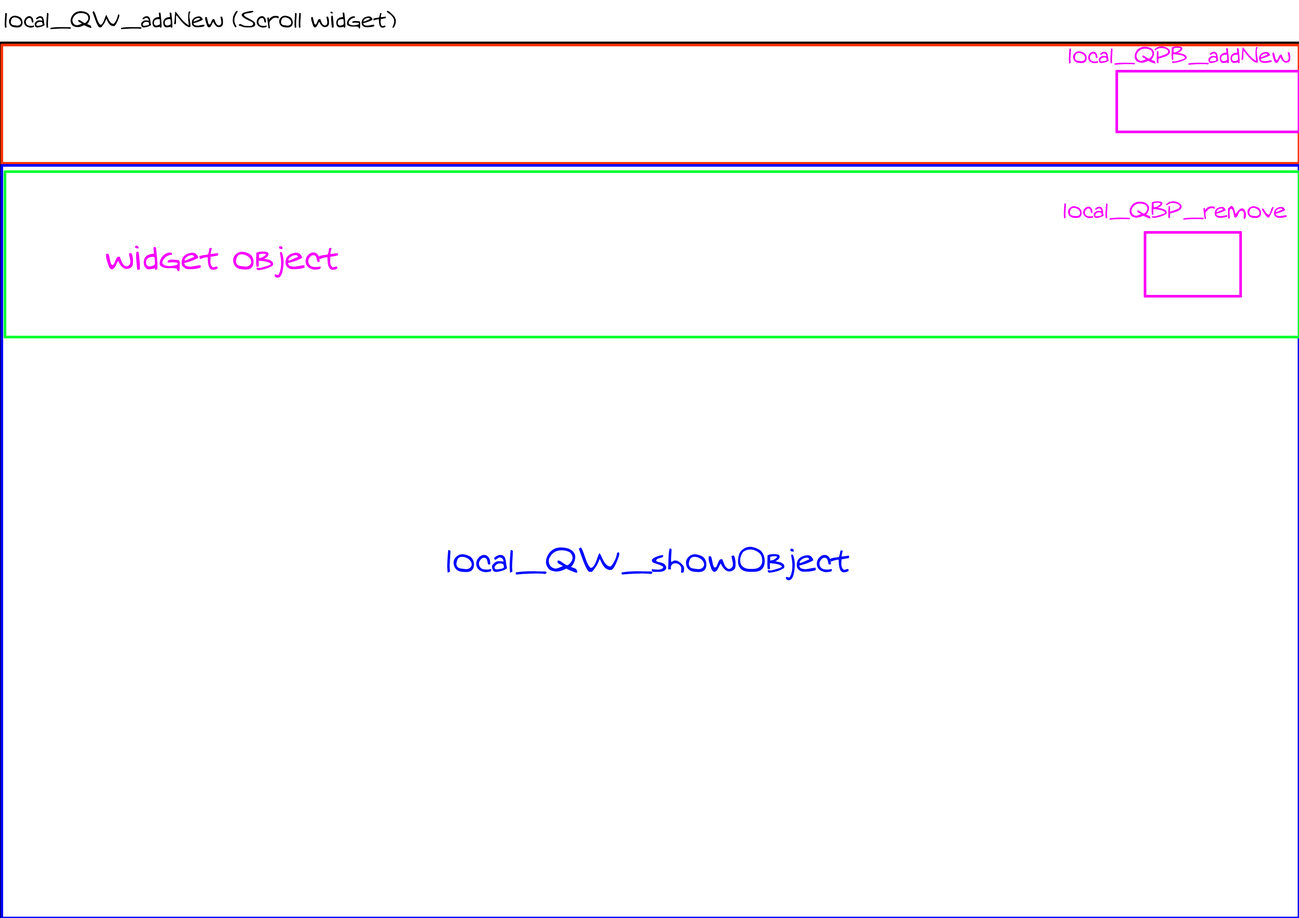
<style>
.page{position:relative;width:1299px;height:918px;background:#ffffff}
.page>*{position:absolute;margin:0}
.t1{font:21.8px "MTOaugie-Regular";color:#000000}
.t2{font:21.8px "MTOaugie-Regular";color:#f600ff}
.t3{font:32.7px "MTOaugie-Regular";color:#f600ff}
.t4{font:32.7px "MTOaugie-Regular";color:#000cff}
</style>
<div class="page">
<p class="t1" style="left:5px;top:11px;width:391px;height:18px">local_QW_addNew (Scroll widget)</p>
<p class="t2" style="left:1069px;top:46px;width:221px;height:19px">local_QPB_addNew</p>
<p class="t2" style="left:1063px;top:201px;width:223px;height:19px">local_QBP_remove</p>
<p class="t3" style="left:106px;top:246px;width:232px;height:32px">widget object</p>
<p class="t4" style="left:447px;top:547px;width:402px;height:34px">local_QW_showObject</p>
</div>
